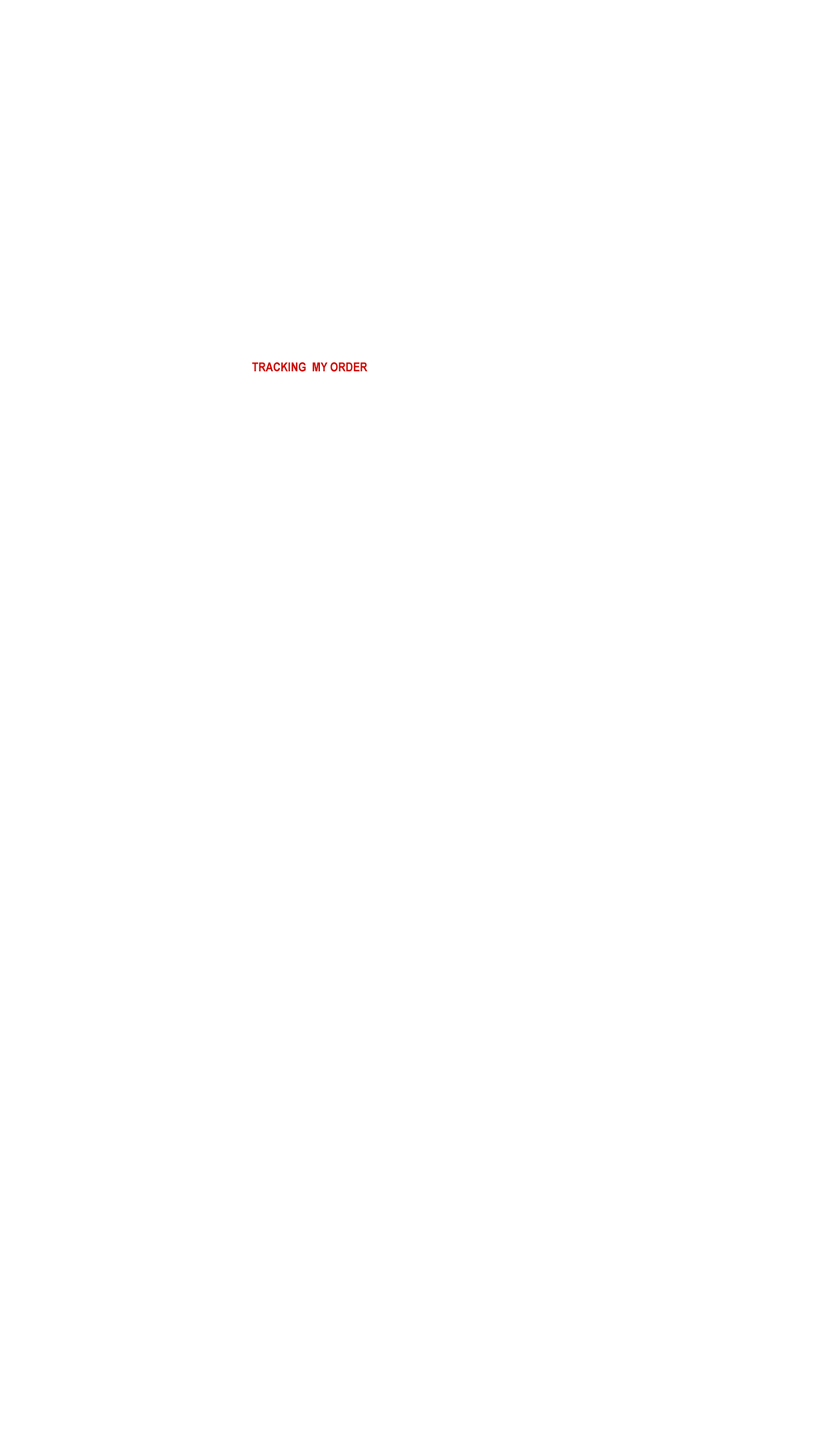
<style>
.page{position:relative;width:824px;height:1448px;background:#ffffff}
.page>*{position:absolute;margin:0}
.t1{font:12.4px "Arial-BoldMT";color:#ce0701;text-transform:uppercase;scale:0.83 1}
</style>
<div class="page">
<p class="t1" style="left:252px;top:362px;width:115px;height:10px">Tracking  my Order</p>
</div>
